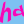
<style>
.page{position:relative;width:24px;height:24px;background:#7dc2f2}
.page>*{position:absolute;margin:0}
.t1{font:20.2px "MalgunGothicBold";letter-spacing:-0.025em;color:#f508ba}
</style>
<div class="page">
<p class="t1" style="left:0px;top:1px;width:26px;height:23px">hd</p>
</div>
